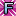
<style>
.page{position:relative;width:16px;height:16px}
.page>*{position:absolute;margin:0}
.t1{font:14px "Verdana";font-weight:bold;scale:1.2 1}
</style>
<div class="page">
<p class="t1" style="left:4px;top:3px;width:9px;height:11px">F</p>
</div>
